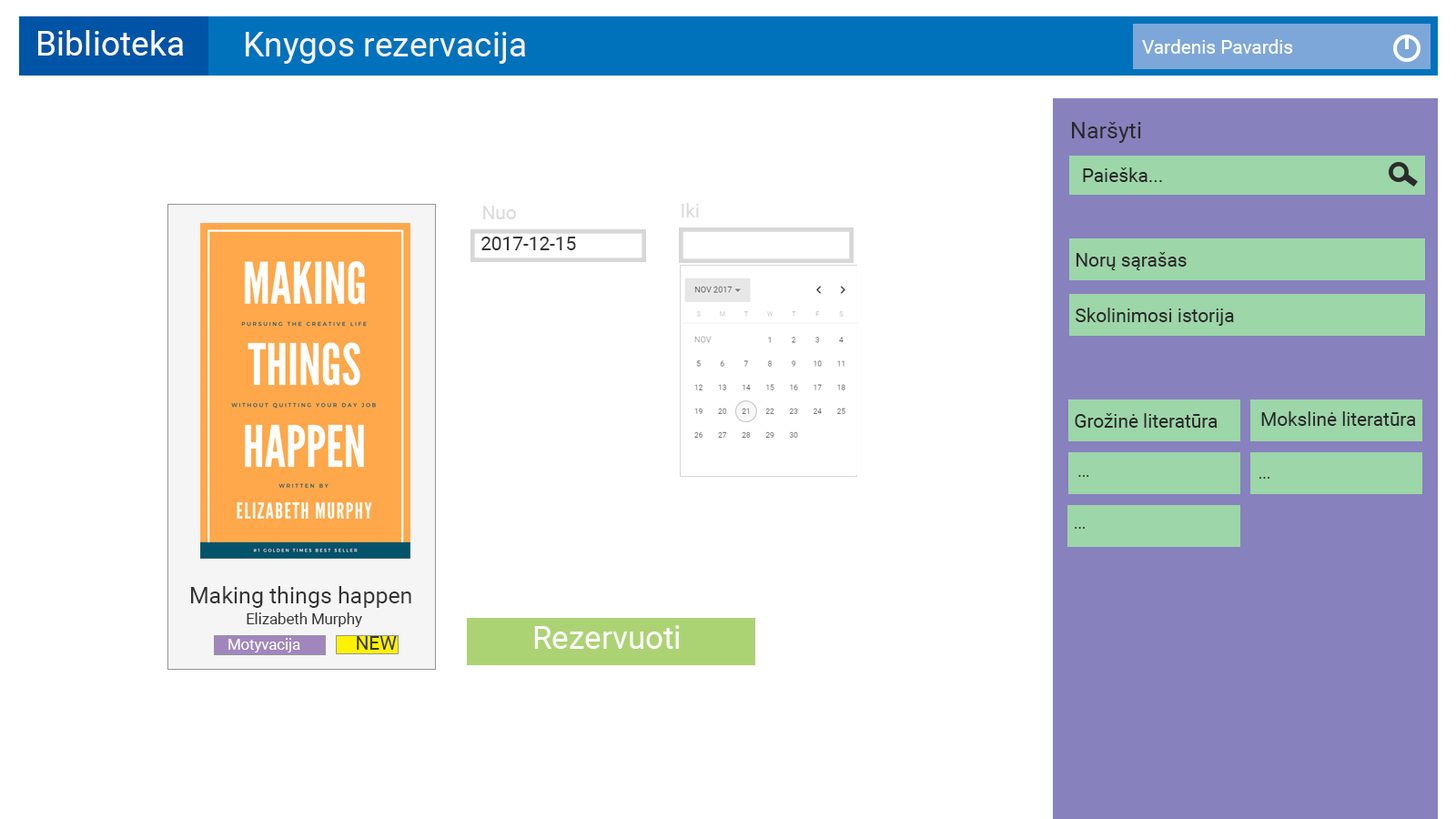
<style>
.page{position:relative;width:1456px;height:819px;background:#ffffff}
.page>*{position:absolute;margin:0}
.t1{font:34.1px "Roboto-Regular";color:#ffffff}
.t2{font:34.1px "Roboto-Regular";color:#f2f2f2}
.t3{font:19px "Roboto-Regular";color:#ffffff}
.t4{font:22.7px "Roboto-Regular";color:#292929}
.t5{font:19px "Roboto-Regular";color:#262626}
.t6{font:19px "Roboto-Regular";color:#dbdbdb}
.t7{font:19px "Roboto-Regular";color:#353535}
.t8{font:19px "Roboto-Regular";color:#292929}
.t9{font:15.2px "Roboto-Regular";color:#292929}
.t10{font:22.7px "Roboto-Regular";color:#343434}
.t11{font:15.2px "Roboto-Regular";color:#343434}
.t12{font:31.6px "Roboto-Regular";color:#ffffff}
.t13{font:15.2px "Roboto-Regular";color:#ffffff}
</style>
<div class="page">
<p class="t1" style="left:38px;top:30px;width:146px;height:26px">Biblioteka</p>
<p class="t2" style="left:246px;top:32px;width:280px;height:32px">Knygos rezervacija</p>
<p class="t3" style="left:1142px;top:39px;width:151px;height:15px">Vardenis Pavardis</p>
<p class="t4" style="left:1072px;top:122px;width:69px;height:21px">Naršyti</p>
<p class="t5" style="left:1083px;top:167px;width:79px;height:15px">Paieška...</p>
<p class="t6" style="left:483px;top:206px;width:33px;height:13px">Nuo</p>
<p class="t6" style="left:682px;top:203px;width:17px;height:14px">Iki</p>
<p class="t7" style="left:481px;top:237px;width:95px;height:13px">2017-12-15</p>
<p class="t8" style="left:1076px;top:252px;width:111px;height:18px">Norų sąrašas</p>
<p class="t8" style="left:1076px;top:308px;width:158px;height:18px">Skolinimosi istorija</p>
<p class="t8" style="left:1075px;top:413px;width:143px;height:15px">Grožinė literatūra</p>
<p class="t8" style="left:1261px;top:411px;width:155px;height:15px">Mokslinė literatūra</p>
<p class="t9" style="left:1078px;top:475px;width:11px;height:2px">...</p>
<p class="t9" style="left:1259px;top:477px;width:10px;height:2px">...</p>
<p class="t9" style="left:1075px;top:527px;width:10px;height:2px">...</p>
<p class="t10" style="left:191px;top:586px;width:220px;height:22px">Making things happen</p>
<p class="t11" style="left:247px;top:612px;width:115px;height:15px">Elizabeth Murphy</p>
<p class="t12" style="left:534px;top:625px;width:146px;height:24px">Rezervuoti</p>
<p class="t13" style="left:228px;top:638px;width:72px;height:14px">Motyvacija</p>
<p class="t7" style="left:357px;top:636px;width:40px;height:14px">NEW</p>
</div>
